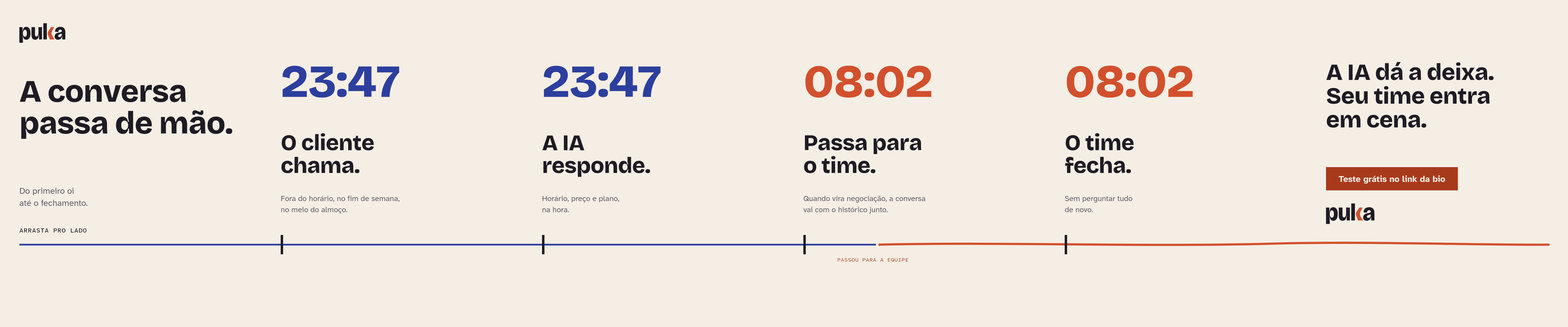
<style>
.page{position:relative;width:1568px;height:327px;background:#f4eee4}
.page>*{position:absolute;margin:0}
.t1{font:46px "BricolageGrotesque-ExtraBold";letter-spacing:-0.012em;color:#2d3f9e}
.t2{font:46px "BricolageGrotesque-ExtraBold";letter-spacing:-0.012em;color:#d2502d}
.t3{font:23.2px/23.7px "BricolageGrotesque-ExtraBold";letter-spacing:-0.012em;color:#1e1b24}
.t4{font:31px/31.7px "BricolageGrotesque-ExtraBold";letter-spacing:-0.012em;color:#1e1b24}
.t5{font:22.3px/22.7px "BricolageGrotesque-ExtraBold";letter-spacing:-0.012em;color:#1e1b24}
.t6{font:8.7px "AtkinsonHyperlegibleNext-Bold";color:#f4eee4}
.t7{font:8.7px/12.1px "AtkinsonHyperlegibleNext-Regular";color:#5e5868}
.t8{font:7.7px/11.1px "AtkinsonHyperlegibleNext-Regular";color:#5e5868}
.t9{font:6.3px "AtkinsonHyperlegibleMono-Medium";letter-spacing:0.04em;color:#1e1b24}
.t10{font:5.3px "AtkinsonHyperlegibleMono-Regular";letter-spacing:0.04em;color:#a83a1c}
</style>
<div class="page">
<p class="t1" style="left:282px;top:66px;width:117px;height:32px">23:47</p>
<p class="t1" style="left:544px;top:66px;width:117px;height:32px">23:47</p>
<p class="t2" style="left:805px;top:66px;width:126px;height:32px">08:02</p>
<p class="t2" style="left:1067px;top:66px;width:126px;height:32px">08:02</p>
<p class="t3" style="left:1326px;top:62px;width:168px;height:66px">A IA dá a deixa.<br>Seu time entra<br>em cena.</p>
<p class="t4" style="left:20px;top:81px;width:212px;height:58px">A conversa<br>passa de mão.</p>
<p class="t5" style="left:281px;top:133px;width:93px;height:40px">O cliente<br>chama.</p>
<p class="t5" style="left:542px;top:135px;width:108px;height:42px">A IA<br>responde.</p>
<p class="t5" style="left:804px;top:135px;width:117px;height:38px">Passa para<br>o time.</p>
<p class="t5" style="left:1065px;top:133px;width:69px;height:40px">O time<br>fecha.</p>
<p class="t6" style="left:1339px;top:175px;width:106px;height:8px">Teste grátis no link da bio</p>
<p class="t7" style="left:20px;top:188px;width:68px;height:18px">Do primeiro oi<br>até o fechamento.</p>
<p class="t8" style="left:281px;top:196px;width:119px;height:18px">Fora do horário, no fim de semana,<br>no meio do almoço.</p>
<p class="t8" style="left:543px;top:196px;width:76px;height:16px">Horário, preço e plano,<br>na hora.</p>
<p class="t8" style="left:803px;top:196px;width:122px;height:17px">Quando vira negociação, a conversa<br>vai com o histórico junto.</p>
<p class="t8" style="left:1065px;top:196px;width:67px;height:16px">Sem perguntar tudo<br>de novo.</p>
<p class="t9" style="left:19px;top:228px;width:68px;height:4px">ARRASTA PRO LADO</p>
<p class="t10" style="left:838px;top:258px;width:70px;height:3px">PASSOU PARA A EQUIPE</p>
</div>
